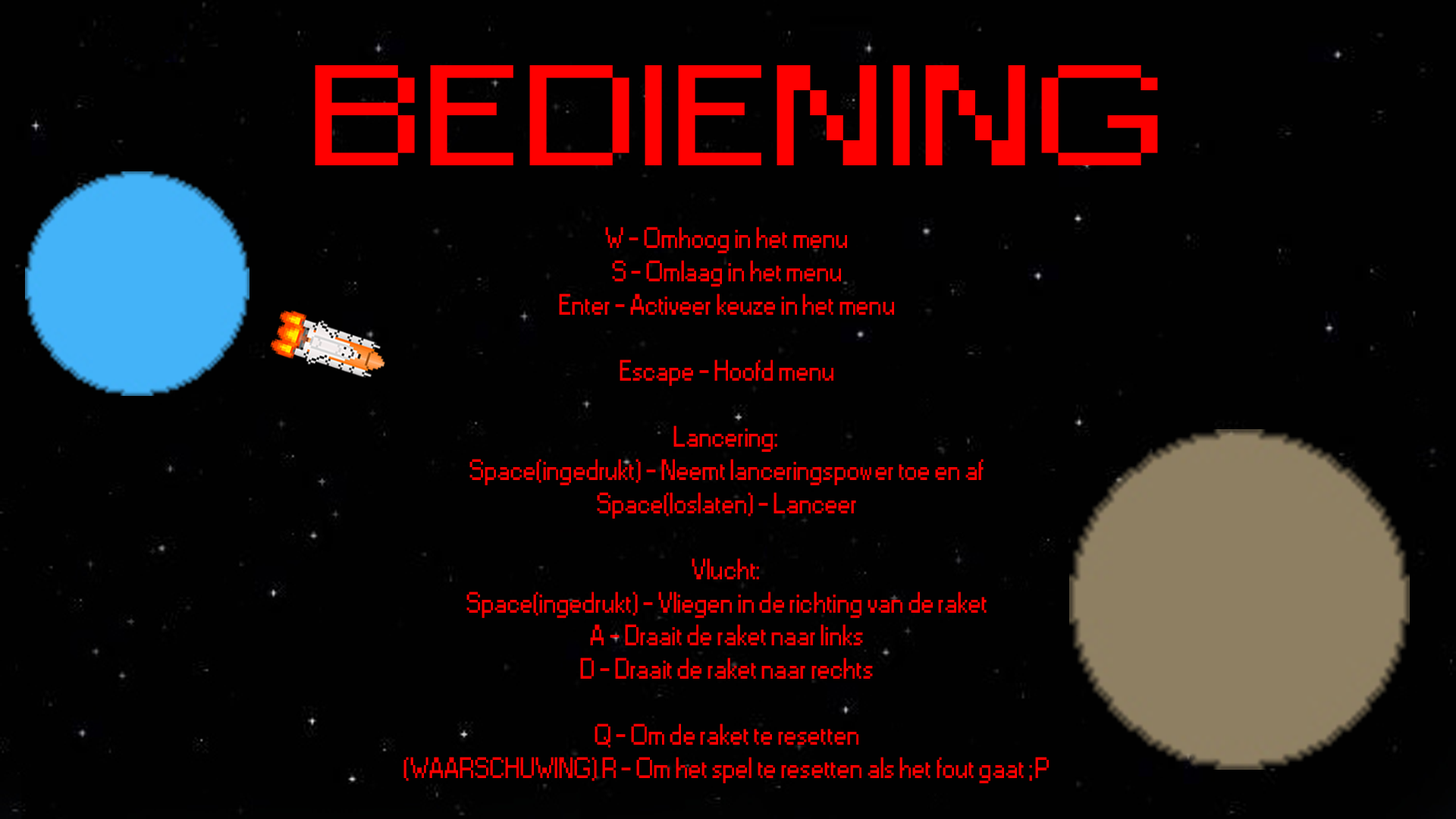
<style>
.page{position:relative;width:1456px;height:819px;background:#010101}
.page>*{position:absolute;margin:0}
.t1{font:133.4px "Small Fonts";color:#ff0000;scale:1.58 1}
.t2{font:27.6px "Small Fonts";color:#ff0000}
</style>
<div class="page">
<p class="t1" style="left:315px;top:65px;width:843px;height:100px">BEDIENING</p>
<p class="t2" style="left:403px;top:227px;width:646px;height:556px;text-align:center">W - Omhoog in het menu<br>S - Omlaag in het menu<br>Enter - Activeer keuze in het menu<br><br>Escape - Hoofd menu<br><br>Lancering:<br>Space(ingedrukt) - Neemt lanceringspower toe en af<br>Space(loslaten) - Lanceer<br><br>Vlucht:<br>Space(ingedrukt) - Vliegen in de richting van de raket<br>A - Draait de raket naar links<br>D - Draait de raket naar rechts<br><br>Q - Om de raket te resetten<br>(WAARSCHUWING) R - Om het spel te resetten als het fout gaat ;P</p>
</div>
